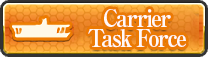
<style>
.page{position:relative;width:208px;height:57px}
.page>*{position:absolute;margin:0}
.t1{font:24px/20px "RyuminPro-ExBold";letter-spacing:-0.08em;color:#fff9f9;scale:0.9 1}
</style>
<div class="page">
<p class="t1" style="left:88px;top:9px;width:98px;height:39px;text-align:center">Carrier<br>Task Force</p>
</div>
